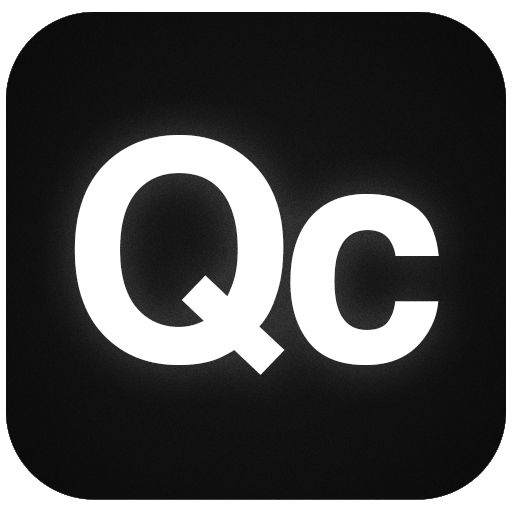
<style>
.page{position:relative;width:512px;height:512px;background:#ffffff}
.page>*{position:absolute;margin:0}
.t1{font:302.1px "Helvetica-Bold";letter-spacing:-0.05em;color:#ffffff}
</style>
<div class="page">
<p class="t1" style="left:74px;top:135px;width:365px;height:240px">Qc</p>
</div>
